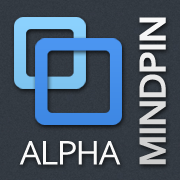
<style>
.page{position:relative;width:180px;height:180px}
.page>*{position:absolute;margin:0}
.t1{font:40px "Corbel-Bold";letter-spacing:-0.05em;color:#e2e2e2}
.t2{font:36px "Corbel";letter-spacing:-0.05em;color:#fafafa}
</style>
<div class="page">
<p class="t1" style="left:139px;top:17px;width:27px;height:148px;rotate:-90deg">MINDPIN</p>
<p class="t2" style="left:19px;top:141px;width:102px;height:24px">ALPHA</p>
</div>
